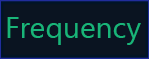
<style>
.page{position:relative;width:149px;height:59px;background:#0a1421}
.page>*{position:absolute;margin:0}
.t1{font:30px "SegoeUISymbol";color:#19b579}
</style>
<div class="page">
<p class="t1" style="left:7px;top:17px;width:134px;height:28px">Frequency</p>
</div>
